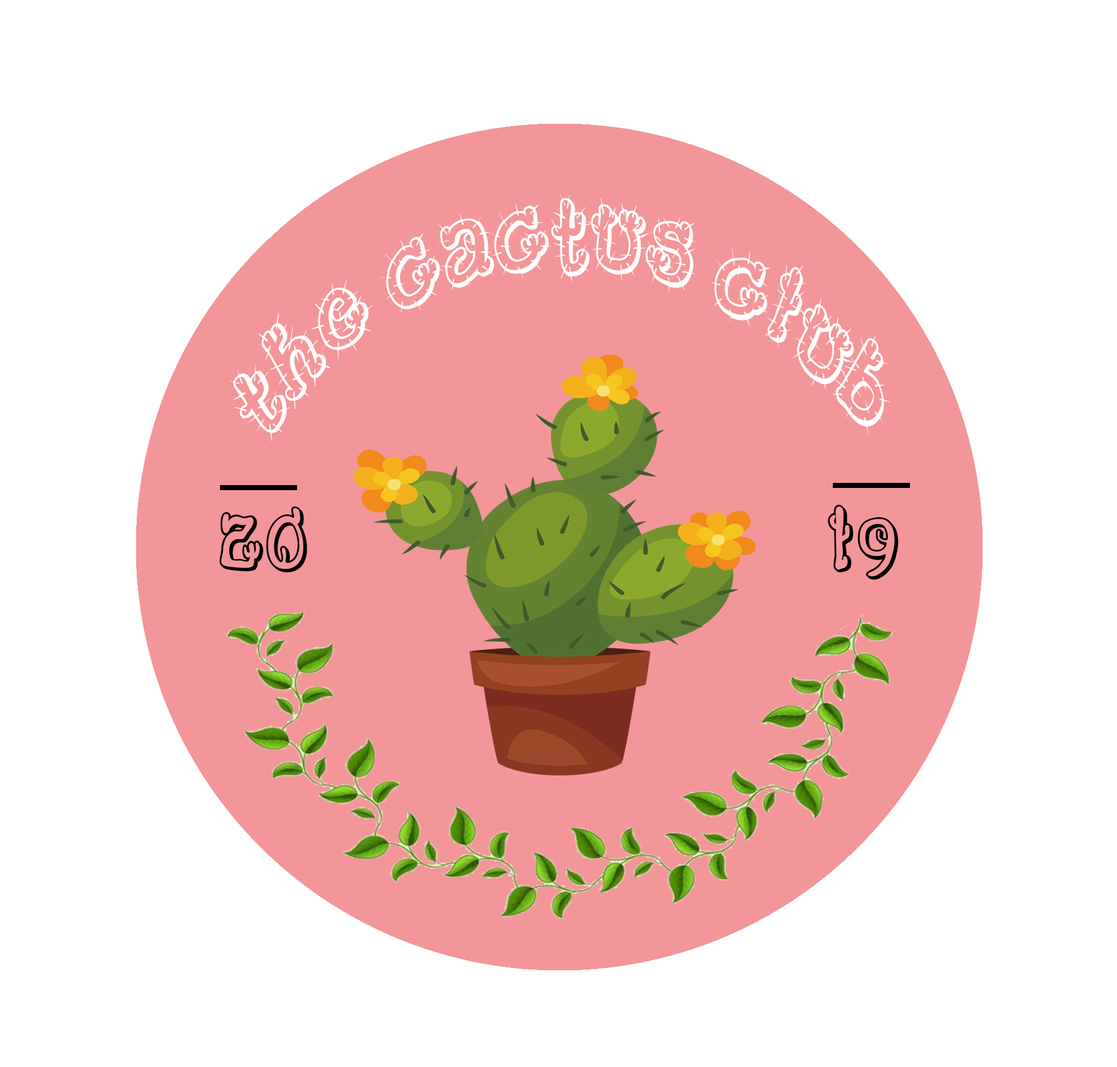
<style>
.page{position:relative;width:1117px;height:1067px;background:#ffffff}
.page>*{position:absolute;margin:0}
.t1{font:24px "CactusSandwich";letter-spacing:0.02em;color:#ffffff;scale:0.72 1}
.t2{font:84.4px "CactusSandwichPlain";letter-spacing:0.02em;color:#000000}
</style>
<div class="page">
<p class="t1" style="left:229px;top:194px;width:663px;height:248px;text-align:center">THE CACTUS CLUB</p>
<p class="t2" style="left:220px;top:505px;width:679px;height:75px">20                          19</p>
</div>
